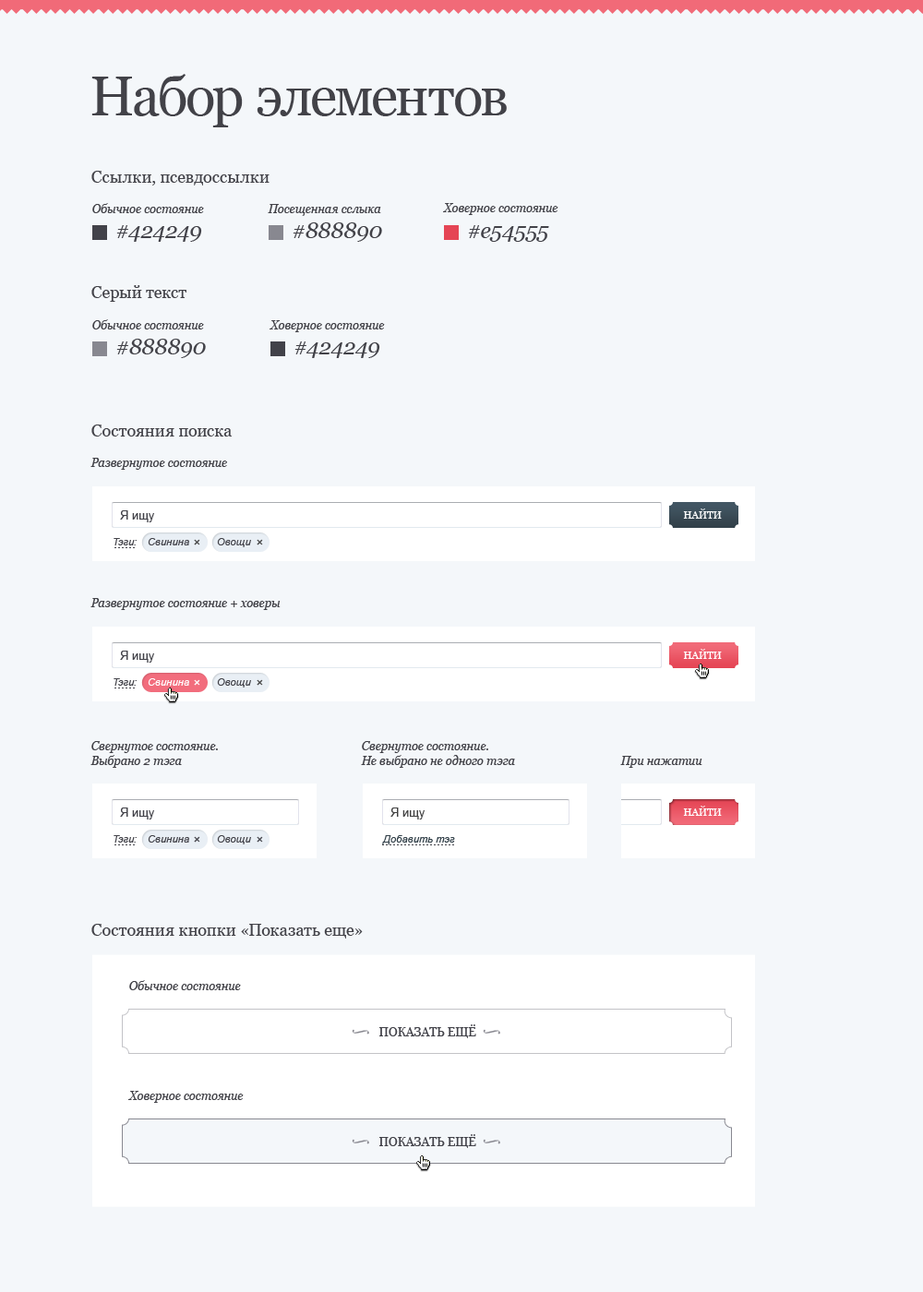
<style>
.page{position:relative;width:923px;height:1292px;background:#f4f7fa}
.page>*{position:absolute;margin:0}
.t1{font:55.4px "Georgia";letter-spacing:-0.02em;color:#424248}
.t2{font:16.6px "Georgia";color:#424248}
.t3{font:12px "Georgia-Italic";color:#424248}
.t4{font:22.1px "Georgia-Italic";color:#424248}
.t5{font:10.2px "Georgia";color:#ffffff;text-transform:uppercase}
.t6{font:12px "ArialMT";color:#424249}
.t7{font:10.2px "Arial-ItalicMT";color:#424249}
.t8{font:12.9px "ArialMT";color:#424242}
.t9{font:10.2px "Arial-ItalicMT";color:#ffffff}
.t10{font:12.9px "ArialMT";color:#ffffff}
.t11{font:12px/14.8px "Georgia-Italic";color:#424248}
.t12{font:12px "ArialMT";color:#424242}
.t13{font:12.9px "ArialMT";color:#424249}
.t14{font:10.2px "Arial-ItalicMT";color:#324049}
.t15{font:12px "Georgia";color:#424249;text-transform:uppercase}
.t16{font:16.6px "Times-Roman";color:#888890;text-transform:uppercase}
</style>
<div class="page">
<p class="t1" style="left:91px;top:74px;width:416px;height:53px">Набор элементов</p>
<p class="t2" style="left:91px;top:171px;width:178px;height:15px">Ссылки, псевдоссылки</p>
<p class="t3" style="left:92px;top:203px;width:112px;height:10px">Обычное состояние</p>
<p class="t3" style="left:268px;top:204px;width:113px;height:12px">Посещенная сслыка</p>
<p class="t3" style="left:443px;top:203px;width:115px;height:12px">Ховерное состояние</p>
<p class="t4" style="left:116px;top:225px;width:86px;height:17px">#424249</p>
<p class="t4" style="left:293px;top:222px;width:89px;height:20px">#888890</p>
<p class="t4" style="left:468px;top:225px;width:81px;height:17px">#e54555</p>
<p class="t2" style="left:91px;top:285px;width:95px;height:17px">Серый текст</p>
<p class="t3" style="left:92px;top:319px;width:112px;height:10px">Обычное состояние</p>
<p class="t3" style="left:269px;top:320px;width:116px;height:12px">Ховерное состояние</p>
<p class="t4" style="left:116px;top:339px;width:90px;height:19px">#888890</p>
<p class="t4" style="left:294px;top:341px;width:86px;height:17px">#424249</p>
<p class="t2" style="left:91px;top:425px;width:142px;height:12px">Состояния поиска</p>
<p class="t3" style="left:90px;top:458px;width:137px;height:12px">Развернутое состояние</p>
<p class="t5" style="left:683px;top:509px;width:39px;height:10px">Найти</p>
<p class="t6" style="left:120px;top:510px;width:34px;height:12px">Я ищу</p>
<p class="t7" style="left:114px;top:538px;width:23px;height:7px">Тэги:</p>
<p class="t7" style="left:148px;top:538px;width:41px;height:7px">Свинина</p>
<p class="t8" style="left:194px;top:539px;width:6px;height:6px;rotate:-45deg">+</p>
<p class="t7" style="left:217px;top:538px;width:34px;height:9px">Овощи</p>
<p class="t8" style="left:257px;top:539px;width:6px;height:6px;rotate:-45deg">+</p>
<p class="t3" style="left:90px;top:598px;width:191px;height:12px">Развернутое состояние + ховеры</p>
<p class="t6" style="left:120px;top:651px;width:34px;height:12px">Я ищу</p>
<p class="t5" style="left:683px;top:649px;width:39px;height:10px">Найти</p>
<p class="t7" style="left:114px;top:678px;width:23px;height:8px">Тэги:</p>
<p class="t9" style="left:148px;top:678px;width:41px;height:8px">Свинина</p>
<p class="t10" style="left:194px;top:679px;width:6px;height:7px;rotate:-45deg">+</p>
<p class="t7" style="left:217px;top:678px;width:34px;height:10px">Овощи</p>
<p class="t8" style="left:257px;top:679px;width:6px;height:7px;rotate:-45deg">+</p>
<p class="t11" style="left:90px;top:741px;width:128px;height:27px">Свернутое состояние. <br>Выбрано 2 тэга</p>
<p class="t11" style="left:361px;top:741px;width:154px;height:27px">Свернутое состояние.<br>Не выбрано не одного тэга</p>
<p class="t3" style="left:620px;top:756px;width:82px;height:12px">При нажатии</p>
<p class="t6" style="left:120px;top:808px;width:34px;height:12px">Я ищу</p>
<p class="t12" style="left:390px;top:808px;width:35px;height:12px">Я ищу</p>
<p class="t5" style="left:683px;top:806px;width:39px;height:10px">Найти</p>
<p class="t7" style="left:114px;top:835px;width:23px;height:8px">Тэги:</p>
<p class="t7" style="left:148px;top:835px;width:41px;height:8px">Свинина</p>
<p class="t13" style="left:194px;top:836px;width:6px;height:7px;rotate:-45deg">+</p>
<p class="t7" style="left:217px;top:835px;width:34px;height:9px">Овощи</p>
<p class="t13" style="left:257px;top:836px;width:6px;height:7px;rotate:-45deg">+</p>
<p class="t14" style="left:382px;top:835px;width:73px;height:9px">Добавить тэг</p>
<p class="t2" style="left:91px;top:924px;width:272px;height:15px">Состояния кнопки «Показать еще»</p>
<p class="t3" style="left:129px;top:980px;width:112px;height:10px">Обычное состояние</p>
<p class="t15" style="left:379px;top:1024px;width:97px;height:14px">Показать ещЁ</p>
<p class="t16" style="left:352px;top:1029px;width:17px;height:6px;rotate:75deg">∫</p>
<p class="t16" style="left:483px;top:1029px;width:17px;height:6px;rotate:75deg">∫</p>
<p class="t3" style="left:128px;top:1091px;width:116px;height:12px">Ховерное состояние</p>
<p class="t16" style="left:352px;top:1139px;width:17px;height:5px;rotate:75deg">∫</p>
<p class="t15" style="left:379px;top:1134px;width:97px;height:14px">Показать ещЁ</p>
<p class="t16" style="left:483px;top:1139px;width:17px;height:5px;rotate:75deg">∫</p>
</div>
